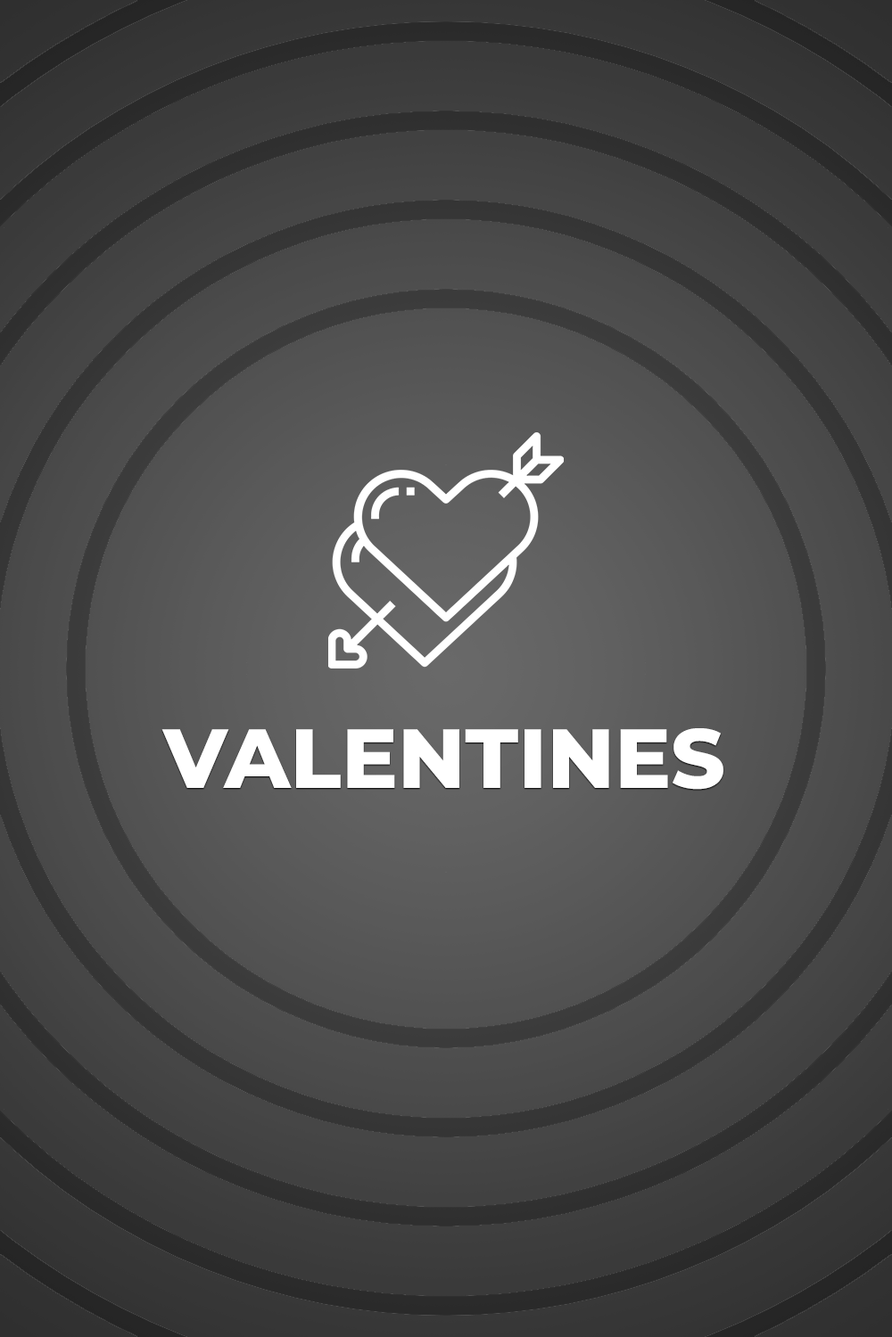
<style>
.page{position:relative;width:892px;height:1337px}
.page>*{position:absolute;margin:0}
.t1{font:83.8px "MontserratRoman-ExtraBold";color:#ffffff}
</style>
<div class="page">
<p class="t1" style="left:161px;top:728px;width:562px;height:62px">VALENTINES</p>
</div>
